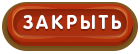
<style>
.page{position:relative;width:140px;height:54px;background:#ffffff}
.page>*{position:absolute;margin:0}
.t1{font:19px "RotondaC-Bold";letter-spacing:0.16em;color:#ffffff;text-transform:uppercase}
</style>
<div class="page">
<p class="t1" style="left:23px;top:15px;width:98px;height:14px">закрыть</p>
</div>
